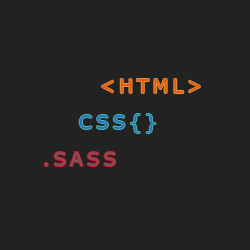
<style>
.page{position:relative;width:250px;height:250px;background:#222222}
.page>*{position:absolute;margin:0}
.t1{font:19px "Verdana";letter-spacing:0.2em;color:#d14318;text-transform:uppercase}
.t2{font:19px "Verdana";letter-spacing:0.2em;color:#2575ce;text-transform:uppercase}
.t3{font:19px "Verdana";letter-spacing:0.2em;color:#8e5454;text-transform:uppercase}
</style>
<div class="page">
<p class="t1" style="left:102px;top:79px;width:98px;height:14px">&lt;HTML&gt;</p>
<p class="t2" style="left:79px;top:114px;width:77px;height:19px">CSS{}</p>
<p class="t3" style="left:45px;top:152px;width:71px;height:14px">.Sass</p>
</div>
